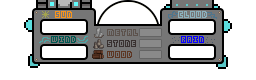
<style>
.page{position:relative;width:256px;height:80px;background:#ffffff}
.page>*{position:absolute;margin:0}
.t1{font:8px "KenPixel-Blocks";color:#f7941d}
.t2{font:8px "KenPixel-Blocks";color:#8cb2be}
.t3{font:8px "KenPixel-Blocks";color:#5c524c}
.t4{font:8px "KenPixel-Blocks";color:#005952}
.t5{font:8px "KenPixel-Blocks";color:#393130}
.t6{font:8px "KenPixel-Blocks";color:#0600ff}
.t7{font:8px "KenPixel-Blocks";color:#5d3623}
</style>
<div class="page">
<p class="t1" style="left:55px;top:11px;width:17px;height:7px">SUN</p>
<p class="t2" style="left:178px;top:11px;width:29px;height:7px">CLOUD</p>
<p class="t3" style="left:107px;top:29px;width:31px;height:7px">Metal</p>
<p class="t4" style="left:51px;top:36px;width:25px;height:7px">WIND</p>
<p class="t5" style="left:107px;top:40px;width:29px;height:7px">Stone</p>
<p class="t6" style="left:181px;top:36px;width:23px;height:7px">RAIN</p>
<p class="t7" style="left:107px;top:51px;width:25px;height:7px">Wood</p>
</div>
